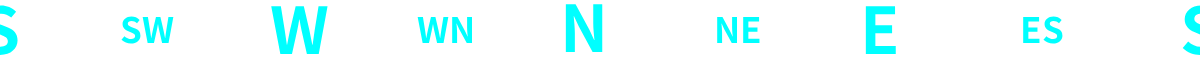
<style>
.page{position:relative;width:1200px;height:60px;background:#ffffff}
.page>*{position:absolute;margin:0}
.t1{font:64.3px "NotoSansKR-Bold";color:#00ffff}
.t2{font:35px "NotoSansKR-Bold";color:#00ffff}
</style>
<div class="page">
<p class="t1" style="left:271px;top:6px;width:57px;height:48px">W</p>
<p class="t1" style="left:565px;top:4px;width:38px;height:48px">N</p>
<p class="t1" style="left:865px;top:6px;width:31px;height:48px">E</p>
<p class="t2" style="left:121px;top:16px;width:53px;height:28px">SW</p>
<p class="t2" style="left:417px;top:17px;width:55px;height:26px">WN</p>
<p class="t2" style="left:717px;top:17px;width:43px;height:26px">NE</p>
<p class="t2" style="left:1023px;top:16px;width:40px;height:28px">ES</p>
</div>
